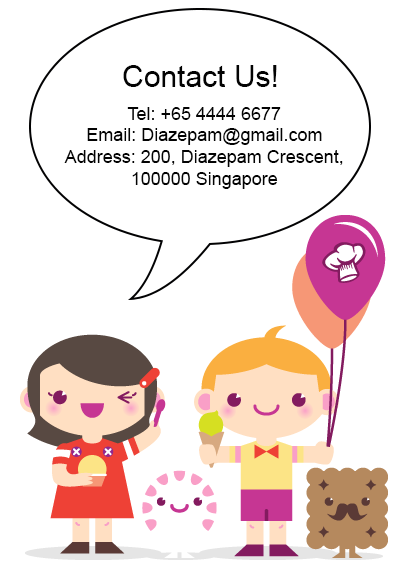
<style>
.page{position:relative;width:413px;height:563px;background:#ffffff}
.page>*{position:absolute;margin:0}
.t1{font:30px "ArialMT";color:#030303}
.t2{font:18px "ArialMT";color:#030303}
</style>
<div class="page">
<p class="t1" style="left:123px;top:65px;width:154px;height:22px">Contact Us!</p>
<p class="t2" style="left:64px;top:107px;width:279px;height:82px;text-align:center">Tel: +65 4444 6677<br>Email: Diazepam@gmail.com<br>Address: 200, Diazepam Crescent, <br>100000 Singapore</p>
</div>
